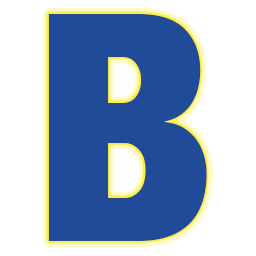
<style>
.page{position:relative;width:256px;height:256px;background:#204b99}
.page>*{position:absolute;margin:0}
.t1{font:318px "HelveticaNeue-CondensedBlack";color:#204b99;text-transform:uppercase}
</style>
<div class="page">
<p class="t1" style="left:48px;top:14px;width:159px;height:227px">B</p>
</div>
